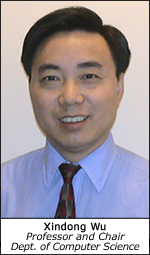
<style>
.page{position:relative;width:150px;height:255px}
.page>*{position:absolute;margin:0}
.t1{font:10px/10px "Verdana-Italic";letter-spacing:-0.025em;color:#000000}
.t2{font:10px/11px "Verdana";color:#000000;font-weight:bold}
.t3{font:10px/10px "Verdana-Italic";color:#000000}
</style>
<div class="page">
<p class="t1" style="left:11px;top:222px;width:129px;height:30px;text-align:center"><span class="t2">Xindong Wu<br></span><span class="t3">Professor and Chair<br></span>Dept. of Computer Science</p>
</div>
